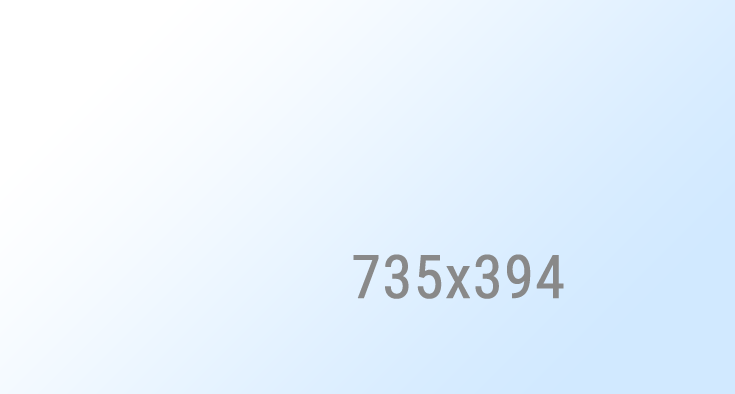
<style>
.page{position:relative;width:735px;height:394px}
.page>*{position:absolute;margin:0}
.t1{font:60px "RobotoCondensed-Regular";color:#898989;font-weight:bold}
</style>
<div class="page">
<p class="t1" style="left:353px;top:254px;width:211px;height:45px">735x394</p>
</div>
